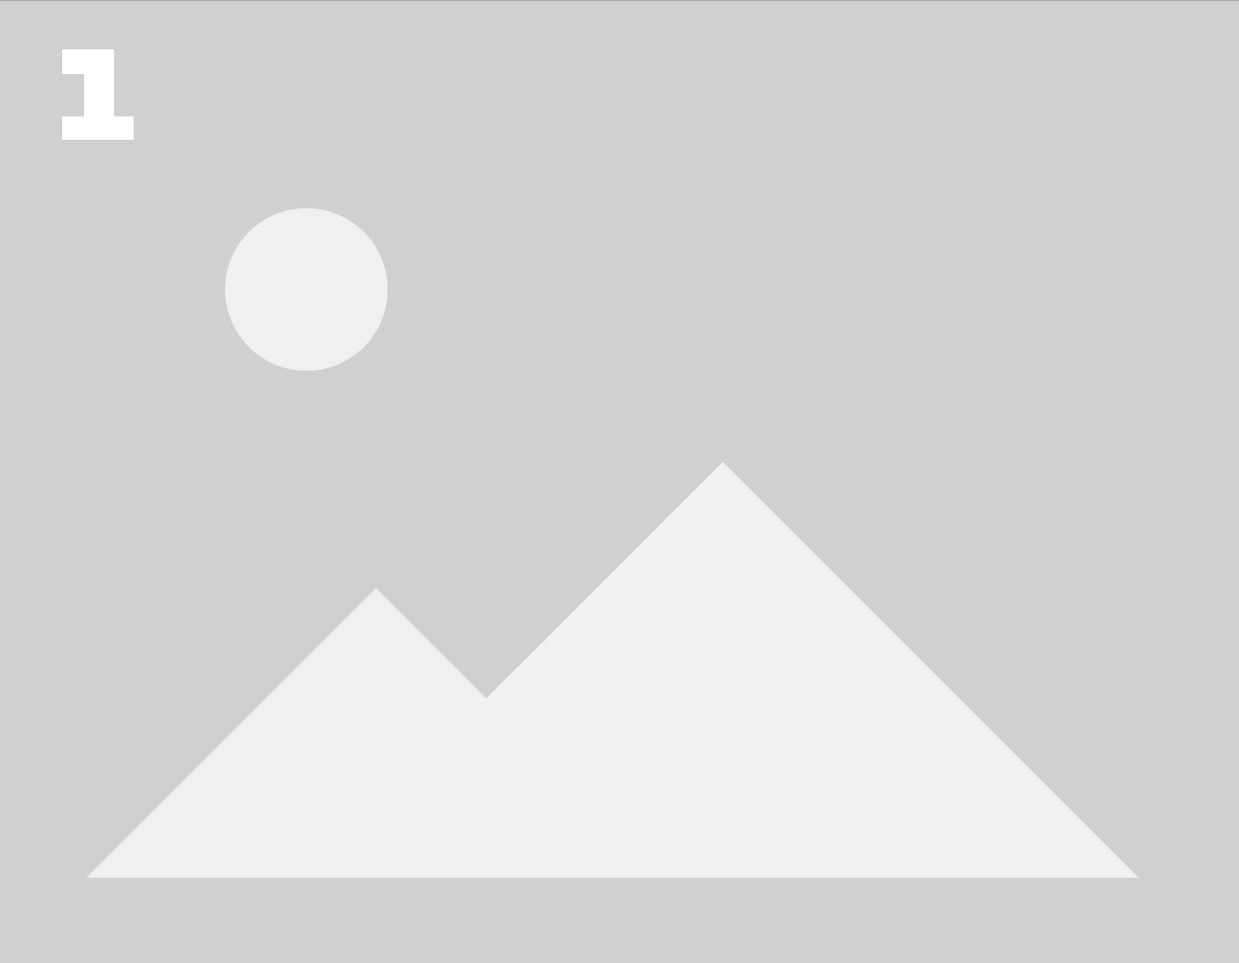
<style>
.page{position:relative;width:1239px;height:963px;background:#d0d0d0}
.page>*{position:absolute;margin:0}
.t1{font:129.7px "Alfarn2";color:#ffffff}
</style>
<div class="page">
<p class="t1" style="left:62px;top:49px;width:72px;height:91px">1</p>
</div>
